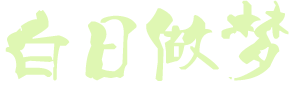
<style>
.page{position:relative;width:304px;height:91px;background:#ffffff}
.page>*{position:absolute;margin:0}
.t1{font:74px "Ò¶¸ùÓÑÌØÉ«¼òÌåÉý¼¶°æ";color:#dff7b3}
</style>
<div class="page">
<p class="t1" style="left:5px;top:0px;width:284px;height:81px">白日做梦</p>
</div>
